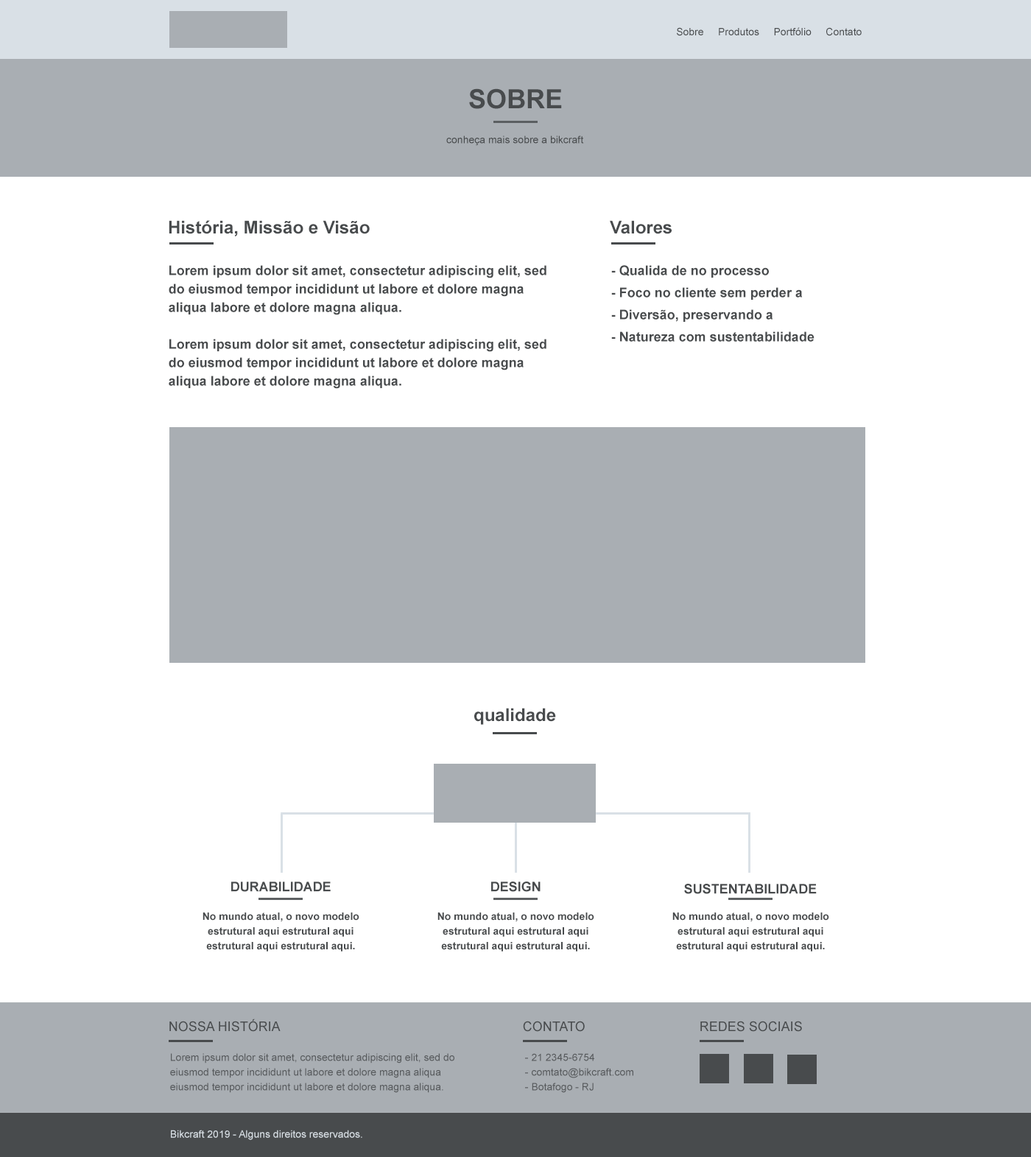
<style>
.page{position:relative;width:1031px;height:1157px;background:#ffffff}
.page>*{position:absolute;margin:0}
.t1{font:10.3px "ArialMT";color:#484b4d}
.t2{font:26.5px "Arial-BoldMT";color:#484b4d;text-transform:uppercase}
.t3{font:17.7px "Arial-BoldMT";color:#484b4d}
.t4{font:13.3px/18.4px "Arial-BoldMT";color:#484b4d}
.t5{font:13.3px/22.1px "Arial-BoldMT";color:#484b4d}
.t6{font:13.3px "Arial-BoldMT";color:#484b4d}
.t7{font:10.3px/14.7px "Arial-BoldMT";color:#484b4d}
.t8{font:13.3px "ArialMT";color:#484b4d;text-transform:uppercase}
.t9{font:10.3px/14.7px "ArialMT";color:#484b4d}
.t10{font:10.3px "ArialMT";color:#d9e0e6}
</style>
<div class="page">
<p class="t1" style="left:677px;top:27px;width:184px;height:9px">Sobre     Produtos     Portfólio     Contato</p>
<p class="t2" style="left:469px;top:88px;width:93px;height:21px">sobre</p>
<p class="t1" style="left:446px;top:135px;width:138px;height:11px">conheça mais sobre a bikcraft</p>
<p class="t3" style="left:169px;top:220px;width:201px;height:16px">História, Missão e Visão</p>
<p class="t3" style="left:610px;top:220px;width:62px;height:14px">Valores</p>
<p class="t4" style="left:169px;top:265px;width:377px;height:124px">Lorem ipsum dolor sit amet, consectetur adipiscing elit, sed do eiusmod tempor incididunt ut labore et dolore magna aliqua labore et dolore magna aliqua. <br><br>Lorem ipsum dolor sit amet, consectetur adipiscing elit, sed do eiusmod tempor incididunt ut labore et dolore magna aliqua labore et dolore magna aliqua.</p>
<p class="t5" style="left:611px;top:265px;width:203px;height:77px">- Qualida de no processo<br>- Foco no cliente sem perder a<br>- Diversão, preservando a<br>- Natureza com sustentabilidade</p>
<p class="t3" style="left:474px;top:708px;width:82px;height:17px">qualidade</p>
<p class="t6" style="left:231px;top:881px;width:100px;height:11px">DURABILIDADE</p>
<p class="t6" style="left:491px;top:881px;width:49px;height:11px">DESIGN</p>
<p class="t6" style="left:684px;top:884px;width:133px;height:10px">SUSTENTABILIDADE</p>
<p class="t7" style="left:202px;top:912px;width:157px;height:39px;text-align:center">No mundo atual, o novo modelo estrutural aqui estrutural aqui<br>estrutural aqui estrutural aqui.</p>
<p class="t7" style="left:437px;top:912px;width:157px;height:39px;text-align:center">No mundo atual, o novo modelo estrutural aqui estrutural aqui<br>estrutural aqui estrutural aqui.</p>
<p class="t7" style="left:672px;top:912px;width:157px;height:39px;text-align:center">No mundo atual, o novo modelo estrutural aqui estrutural aqui<br>estrutural aqui estrutural aqui.</p>
<p class="t8" style="left:169px;top:1018px;width:112px;height:14px">Nossa História</p>
<p class="t8" style="left:523px;top:1021px;width:62px;height:11px">CONTATO</p>
<p class="t8" style="left:700px;top:1021px;width:102px;height:11px">REDES SOCIAIS</p>
<p class="t9" style="left:170px;top:1053px;width:284px;height:40px;opacity:0.88">Lorem ipsum dolor sit amet, consectetur adipiscing elit, sed do eiusmod tempor incididunt ut labore et dolore magna aliqua<br>eiusmod tempor incididunt ut labore et dolore magna aliqua.</p>
<p class="t9" style="left:525px;top:1053px;width:108px;height:40px;opacity:0.88">- 21 2345-6754<br>- comtato@bikcraft.com<br>- Botafogo - RJ</p>
<p class="t10" style="left:171px;top:1130px;width:191px;height:10px">Bikcraft 2019 - Alguns direitos reservados.</p>
</div>
